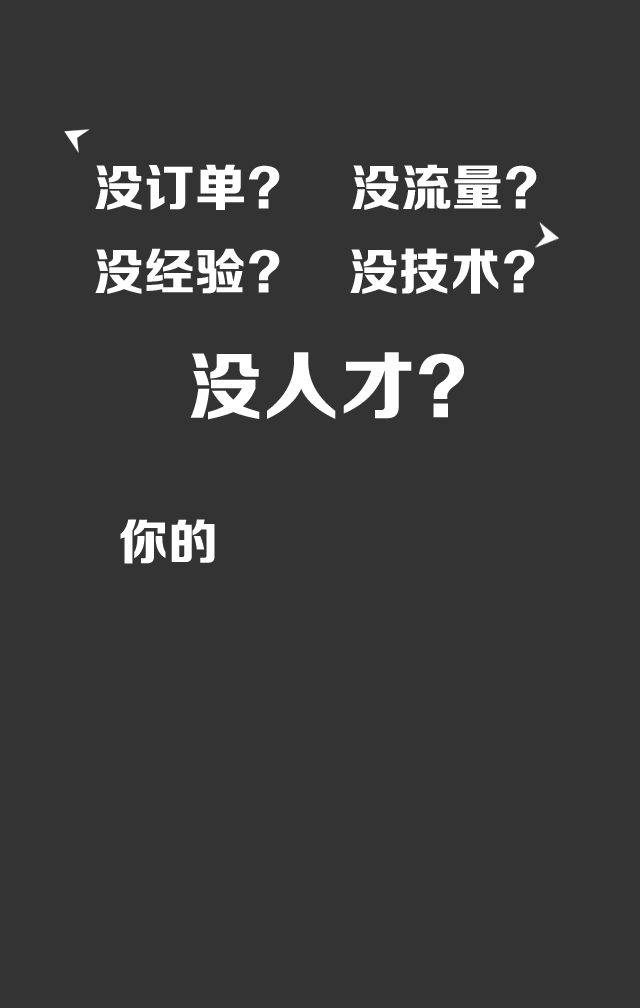
<style>
.page{position:relative;width:640px;height:1008px;background:#333333}
.page>*{position:absolute;margin:0}
.t1{font:50.2px "FZZDHJW--GB1-0";letter-spacing:0.005em;color:#ffffff;text-transform:uppercase}
.t2{font:74.5px "FZZDHJW--GB1-0";letter-spacing:0.005em;color:#ffffff;text-transform:uppercase}
.t3{font:49.4px "FZZDHJW--GB1-0";letter-spacing:0.005em;color:#ffffff;text-transform:uppercase}
</style>
<div class="page">
<p class="t1" style="left:95px;top:164px;width:185px;height:46px">没订单?</p>
<p class="t1" style="left:352px;top:164px;width:185px;height:46px">没流量?</p>
<p class="t1" style="left:95px;top:248px;width:185px;height:46px">没经验?</p>
<p class="t1" style="left:350px;top:248px;width:185px;height:46px">没技术?</p>
<p class="t2" style="left:190px;top:352px;width:274px;height:68px">没人才?</p>
<p class="t3" style="left:120px;top:519px;width:95px;height:45px">你的</p>
</div>
